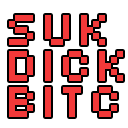
<style>
.page{position:relative;width:128px;height:128px;background:#ffffff}
.page>*{position:absolute;margin:0}
.t1{font:50px/36px "Silkscreen";color:#f23939}
</style>
<div class="page">
<p class="t1" style="left:9px;top:15px;width:114px;height:102px">SUkDICK<br>BITC</p>
</div>
